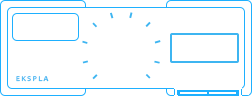
<style>
.page{position:relative;width:252px;height:96px;background:#ffffff}
.page>*{position:absolute;margin:0}
.t1{font:7.5px "Candara-Bold";letter-spacing:0.2em;color:#3eb5f1;text-transform:uppercase}
</style>
<div class="page">
<p class="t1" style="left:16px;top:76px;width:33px;height:6px">ekspla</p>
</div>
